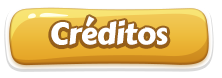
<style>
.page{position:relative;width:222px;height:78px;background:#ffffff}
.page>*{position:absolute;margin:0}
.t1{font:30px "CarterOne";letter-spacing:-0.02em;color:#ffffff}
</style>
<div class="page">
<p class="t1" style="left:51px;top:16px;width:117px;height:29px">Créditos</p>
</div>
